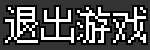
<style>
.page{position:relative;width:150px;height:50px;background:#333333}
.page>*{position:absolute;margin:0}
.t1{font:36px "FZXS12--GB1-0";color:#ffffff}
</style>
<div class="page">
<p class="t1" style="left:5px;top:7px;width:141px;height:36px">退出游戏</p>
</div>
